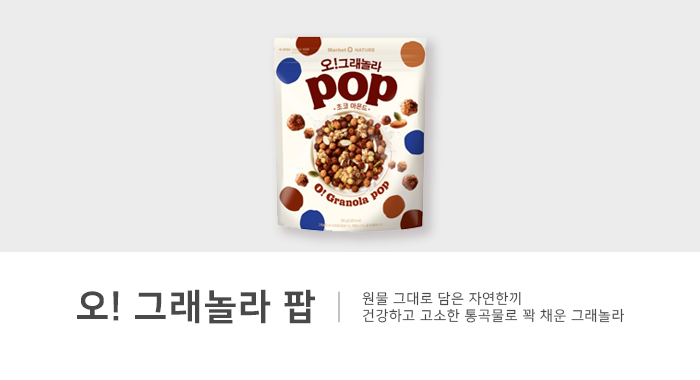
<style>
.page{position:relative;width:700px;height:380px;background:#ececec}
.page>*{position:absolute;margin:0}
.t1{font:36px "NanumSquareEB";letter-spacing:0.05em;color:#494949}
.t2{font:14px "NanumSquareR";letter-spacing:0.05em;color:#494949}
</style>
<div class="page">
<p class="t1" style="left:77px;top:289px;width:238px;height:35px">오! 그래놀라 팝</p>
<p class="t2" style="left:362px;top:291px;width:263px;height:32px">원물 그대로 담은 자연한끼<br>건강하고 고소한 통곡물로 꽉 채운 그래놀라</p>
</div>
